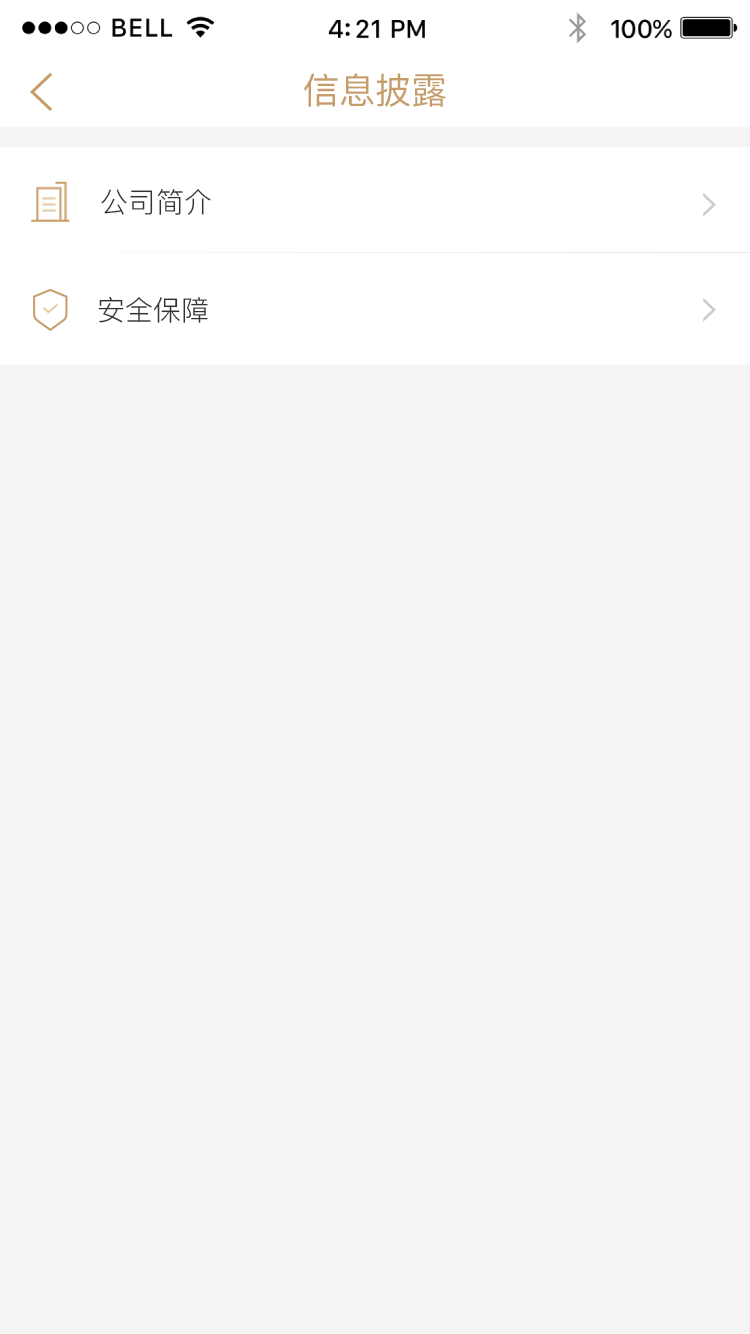
<style>
.page{position:relative;width:750px;height:1334px;background:#f4f4f4}
.page>*{position:absolute;margin:0}
.t1{font:36px "PingFangSC-Regular";color:#c69d68}
.t2{font:28px "PingFang-SC-Regular";color:#333333}
</style>
<div class="page">
<p class="t1" style="left:304px;top:73px;width:142px;height:34px">信息披露</p>
<p class="t2" style="left:101px;top:189px;width:110px;height:26px">公司简介</p>
<p class="t2" style="left:98px;top:297px;width:110px;height:26px">安全保障</p>
</div>
